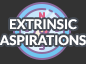
<style>
.page{position:relative;width:86px;height:64px;background:#333333}
.page>*{position:absolute;margin:0}
.t1{font:13.3px "Lato-Bold";color:#ffffff}
</style>
<div class="page">
<p class="t1" style="left:0px;top:19px;width:86px;height:27px;text-align:center">EXTRINSIC<br>ASPIRATIONS</p>
</div>
